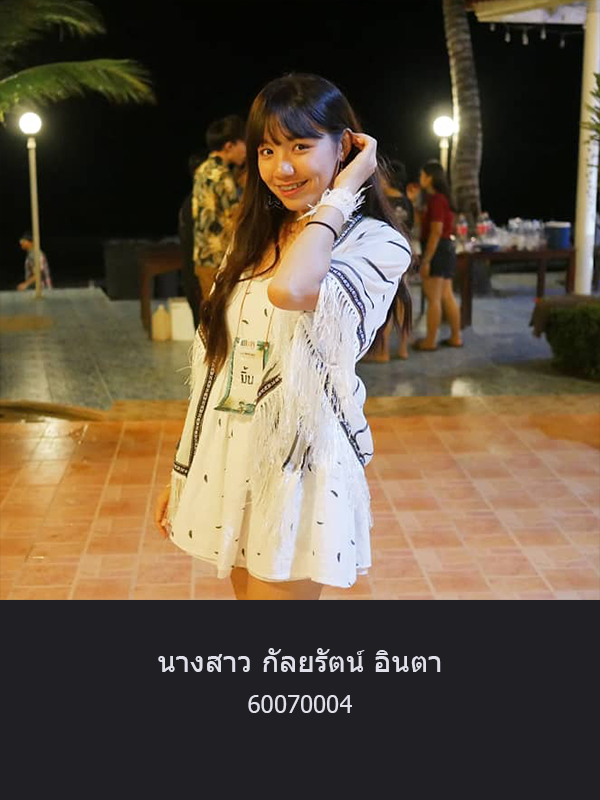
<style>
.page{position:relative;width:600px;height:800px;background:#202024}
.page>*{position:absolute;margin:0}
.t1{font:30px "Tahoma";color:#e0e0eb}
.t2{font:24px "Tahoma";color:#e0e0eb}
</style>
<div class="page">
<p class="t1" style="left:158px;top:648px;width:283px;height:24px">นางสาว กัลยรัตน์ อินตา</p>
<p class="t2" style="left:248px;top:695px;width:104px;height:18px">60070004</p>
</div>
